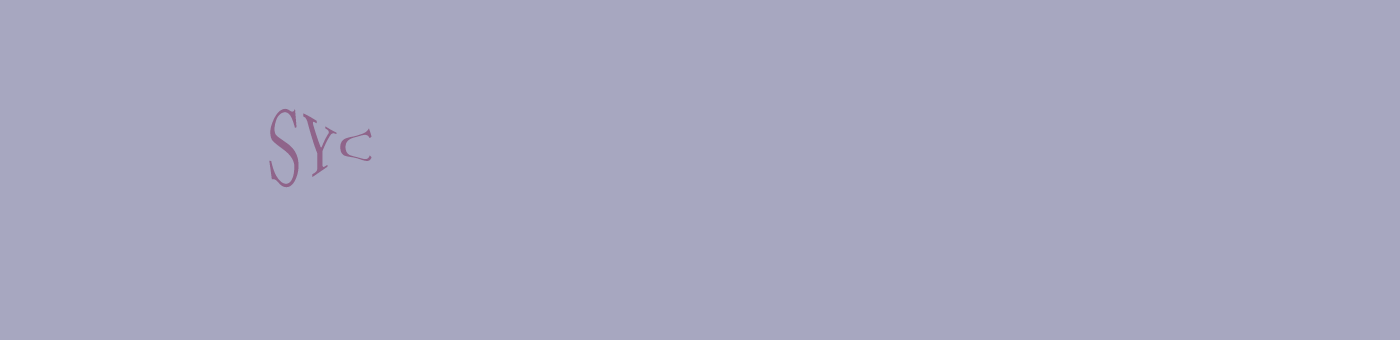
<style>
.page{position:relative;width:1400px;height:340px;background:#a7a7c0}
.page>*{position:absolute;margin:0}
.t1{font:72px "YouYuan";color:#8f648a}
</style>
<div class="page">
<p class="t1" style="left:269px;top:108px;width:103px;height:80px">SYC</p>
</div>
